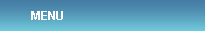
<style>
.page{position:relative;width:205px;height:31px}
.page>*{position:absolute;margin:0}
.t1{font:12px "Arial-BoldMT";color:#fffdfd}
</style>
<div class="page">
<p class="t1" style="left:31px;top:11px;width:32px;height:9px">MENU</p>
</div>
